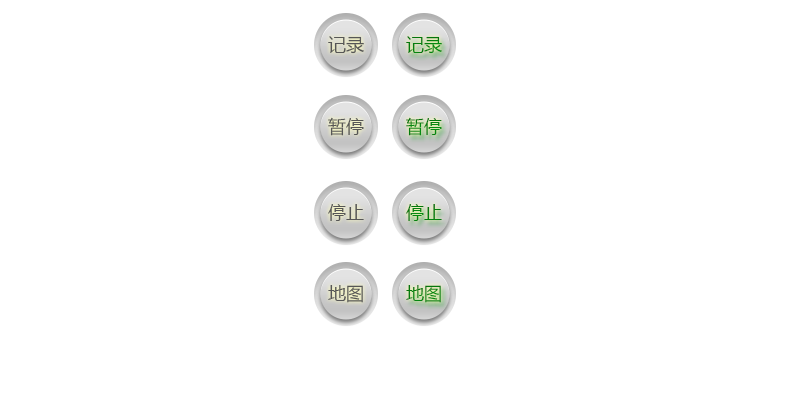
<style>
.page{position:relative;width:800px;height:400px;background:#ffffff}
.page>*{position:absolute;margin:0}
.t1{font:18px "MicrosoftYaHei";color:#565656}
.t2{font:18px "MicrosoftYaHei";color:#047d0d}
.t3{font:18px "MicrosoftYaHei";color:#058610}
.t4{font:18px "MicrosoftYaHei";color:#04810e}
</style>
<div class="page">
<p class="t1" style="left:328px;top:36px;width:36px;height:18px">记录</p>
<p class="t2" style="left:406px;top:36px;width:36px;height:18px">记录</p>
<p class="t1" style="left:328px;top:117px;width:36px;height:19px">暂停</p>
<p class="t3" style="left:406px;top:117px;width:36px;height:19px">暂停</p>
<p class="t1" style="left:328px;top:204px;width:36px;height:17px">停止</p>
<p class="t4" style="left:406px;top:204px;width:36px;height:17px">停止</p>
<p class="t1" style="left:328px;top:285px;width:35px;height:18px">地图</p>
<p class="t2" style="left:406px;top:285px;width:35px;height:18px">地图</p>
</div>
